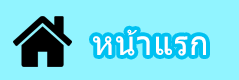
<style>
.page{position:relative;width:239px;height:80px;background:#91f4ff}
.page>*{position:absolute;margin:0}
.t1{font:33.3px "Tahoma";letter-spacing:0.025em;color:#ffffff}
</style>
<div class="page">
<p class="t1" style="left:93px;top:29px;width:113px;height:27px">หน้าแรก</p>
</div>
